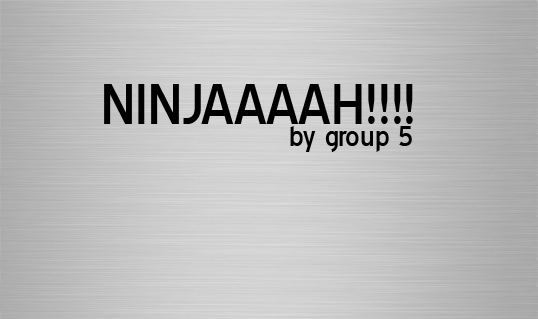
<style>
.page{position:relative;width:538px;height:319px}
.page>*{position:absolute;margin:0}
.t1{font:72px "BlueHighway";color:#000000}
.t2{font:36px "BlueHighway";color:#000000}
</style>
<div class="page">
<p class="t1" style="left:104px;top:84px;width:309px;height:40px">NINJAAAAH!!!!</p>
<p class="t2" style="left:290px;top:126px;width:122px;height:26px">by group 5</p>
</div>
